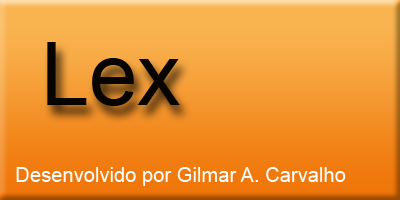
<style>
.page{position:relative;width:400px;height:200px}
.page>*{position:absolute;margin:0}
.t1{font:86.6px "ArialMT";color:#070400}
.t2{font:20.2px "ArialMT";color:#fdfdfc}
</style>
<div class="page">
<p class="t1" style="left:47px;top:42px;width:133px;height:64px">Lex</p>
<p class="t2" style="left:16px;top:167px;width:330px;height:19px">Desenvolvido por Gilmar A. Carvalho</p>
</div>
